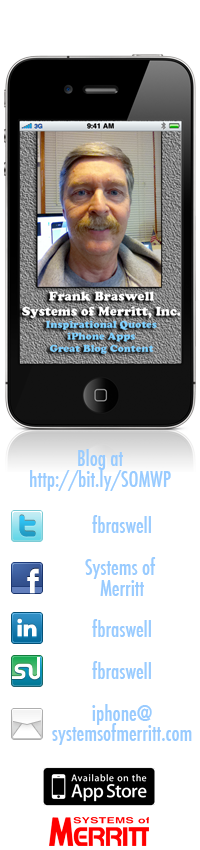
<style>
.page{position:relative;width:200px;height:850px;background:#ffffff}
.page>*{position:absolute;margin:0}
.t1{font:20.8px/20.8px "Futura-CondensedMedium";color:#99ccff}
</style>
<div class="page">
<p class="t1" style="left:30px;top:449px;width:141px;height:42px;text-align:center">Blog at<br>http://bit.ly/SOMWP</p>
<p class="t1" style="left:52px;top:515px;width:140px;height:230px;text-align:center">fbraswell<br><br>Systems of <br>Merritt<br><br>fbraswell<br><br>fbraswell<br><br>iphone@<br>systemsofmerritt.com</p>
</div>
